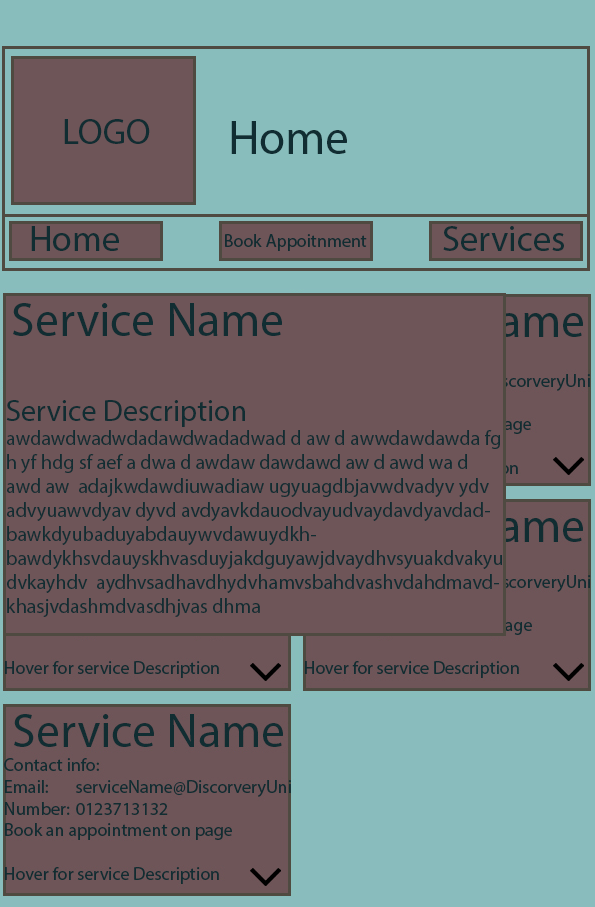
<style>
.page{position:relative;width:595px;height:907px;background:#6e5558}
.page>*{position:absolute;margin:0}
.t1{font:36px "MyriadPro-Regular";color:#112d32}
.t2{font:18px "MyriadPro-Regular";color:#112d32}
.t3{font:48px "MyriadPro-Regular";color:#112d32}
.t4{font:20px "MyriadPro-Regular";color:#112d32}
.t5{font:30px "MyriadPro-Regular";color:#112d32}
</style>
<div class="page">
<p class="t1" style="left:64px;top:119px;width:86px;height:25px"><span class="t2"><br><br>     </span>LOGO</p>
<p class="t3" style="left:231px;top:121px;width:116px;height:33px">Home</p>
<p class="t1" style="left:31px;top:226px;width:88px;height:25px">Home</p>
<p class="t1" style="left:443px;top:226px;width:121px;height:25px">Services</p>
<p class="t2" style="left:225px;top:234px;width:142px;height:17px">Book Appoitnment</p>
<p class="t3" style="left:13px;top:303px;width:269px;height:33px">Service Name</p>
<p class="t4" style="left:6px;top:400px;width:496px;height:217px"><span class="t3"><br><br></span><span class="t5">Service Description<br></span>awdawdwadwdadawdwadadwad d aw d awwdawdawda fg h yf hdg sf aef a dwa d awdaw dawdawd aw d awd wa d awd aw  adajkwdawdiuwadiaw ugyuagdbjavwdvadyv ydv advyuawvdyav dyvd avdyavkdauodvayudvaydavdyavdadbawkdyubaduyabdauywvdawuydkhbawdykhsvdauyskhvasduyjakdguyawjdvaydhvsyuakdvakyudvkayhdv  aydhvsadhavdhydvhamvsbahdvashvdahdmavdkhasjvdashmdvasdhjvas dhma</p>
</div>
